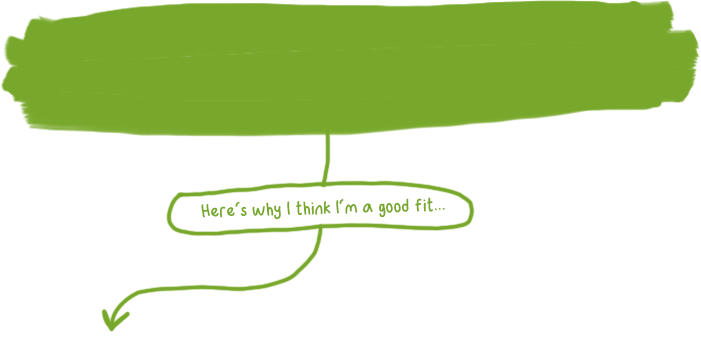
<style>
.page{position:relative;width:701px;height:347px;background:#ffffff}
.page>*{position:absolute;margin:0}
.t1{font:18px "Epicfont1";color:#78a82b}
</style>
<div class="page">
<p class="t1" style="left:201px;top:197px;width:244px;height:23px;rotate:-2deg">Here‘s why I think I‘m a good fit...</p>
</div>
